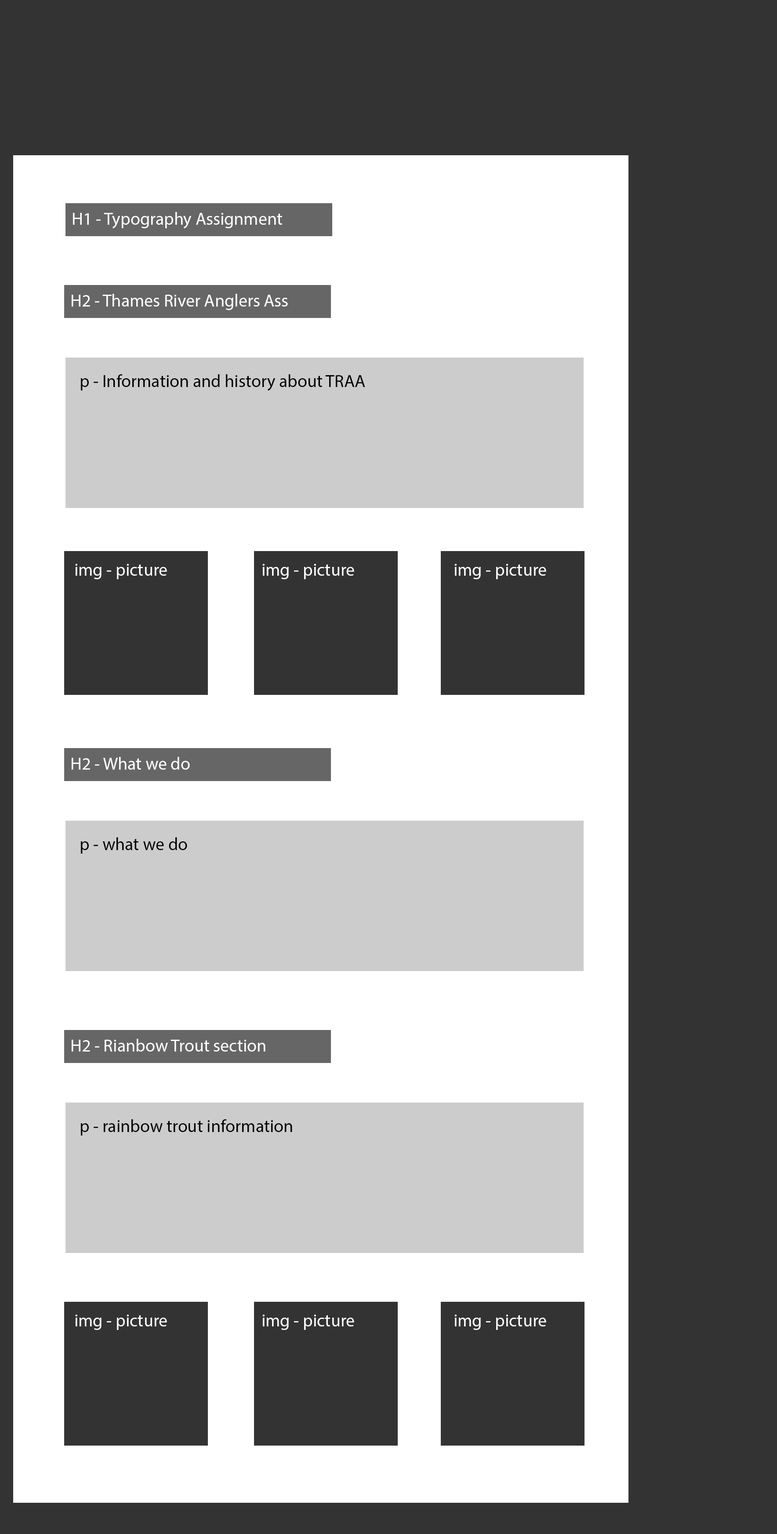
<style>
.page{position:relative;width:777px;height:1534px;background:#333333}
.page>*{position:absolute;margin:0}
.t1{font:17.6px "MyriadPro-Regular";color:#fefefe}
.t2{font:17.6px "MyriadPro-Regular";color:#000000}
</style>
<div class="page">
<p class="t1" style="left:73px;top:212px;width:209px;height:17px">H1 - Typography Assignment</p>
<p class="t1" style="left:72px;top:294px;width:216px;height:16px">H2 - Thames River Anglers Ass</p>
<p class="t2" style="left:80px;top:374px;width:285px;height:17px">p - Information and history about TRAA</p>
<p class="t1" style="left:75px;top:564px;width:92px;height:15px">img - picture</p>
<p class="t1" style="left:263px;top:564px;width:91px;height:15px">img - picture</p>
<p class="t1" style="left:455px;top:564px;width:92px;height:15px">img - picture</p>
<p class="t1" style="left:72px;top:757px;width:118px;height:13px">H2 - What we do</p>
<p class="t2" style="left:80px;top:837px;width:107px;height:17px">p - what we do</p>
<p class="t1" style="left:72px;top:1039px;width:194px;height:12px">H2 - Rianbow Trout section</p>
<p class="t2" style="left:80px;top:1119px;width:212px;height:16px">p - rainbow trout information</p>
<p class="t1" style="left:75px;top:1314px;width:92px;height:16px">img - picture</p>
<p class="t1" style="left:263px;top:1314px;width:91px;height:16px">img - picture</p>
<p class="t1" style="left:455px;top:1314px;width:92px;height:16px">img - picture</p>
</div>
